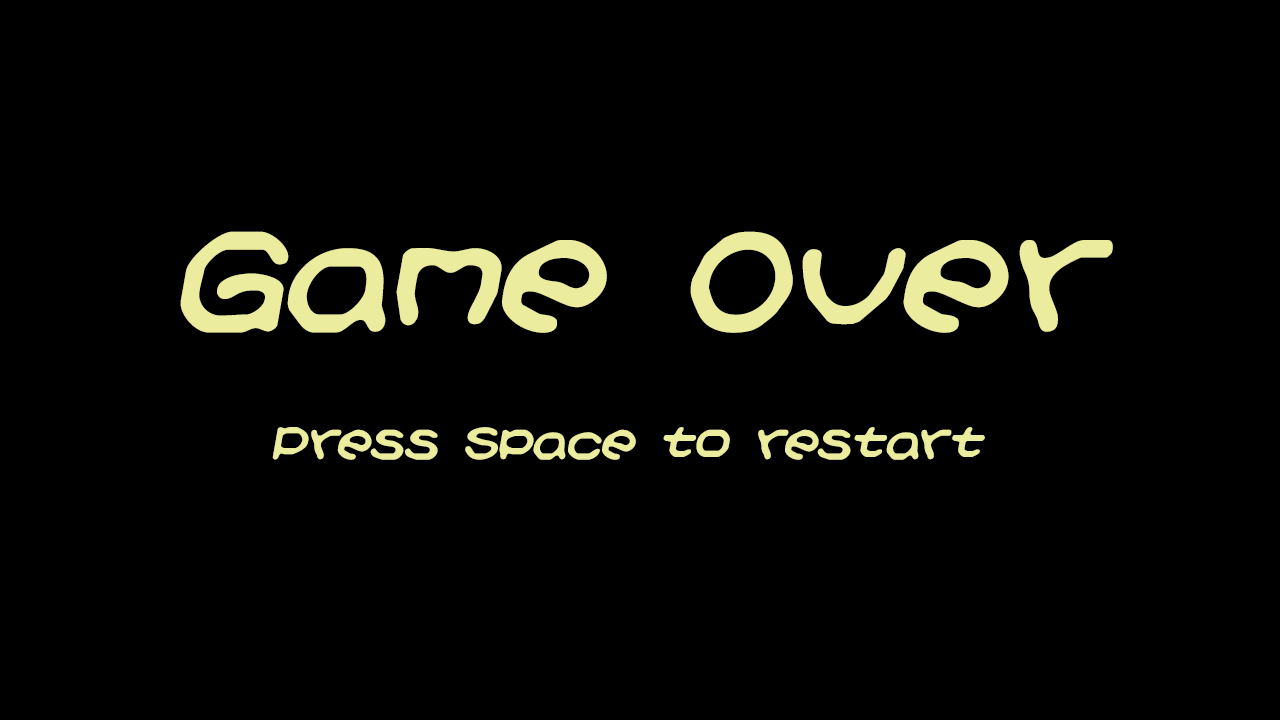
<style>
.page{position:relative;width:1280px;height:720px;background:#000000}
.page>*{position:absolute;margin:0}
.t1{font:150px "KirbyNoKiraKizzu(BRK)";color:#ebec9e;font-weight:bold;font-style:italic}
.t2{font:48px "KirbyNoKiraKizzu(BRK)";color:#ebec9e;font-weight:bold;font-style:italic}
</style>
<div class="page">
<p class="t1" style="left:180px;top:231px;width:933px;height:102px">Game Over</p>
<p class="t2" style="left:272px;top:427px;width:713px;height:33px">Press Space to restart</p>
</div>
